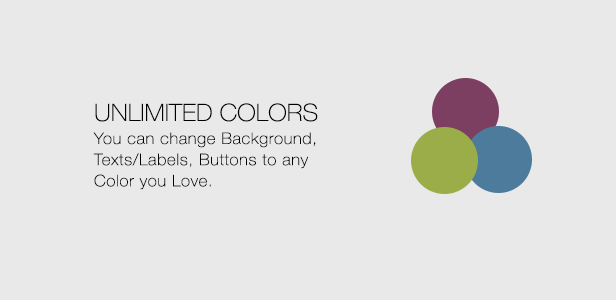
<style>
.page{position:relative;width:616px;height:300px;background:#e9e9e9}
.page>*{position:absolute;margin:0}
.t1{font:24px "HelveticaNeueLTStd-Th";color:#000000;scale:1.04 1}
.t2{font:16px/21.2px "HelveticaNeueLTStd-Th";letter-spacing:0.04em;color:#000000;scale:1.04 1}
</style>
<div class="page">
<p class="t1" style="left:95px;top:103px;width:223px;height:19px">UNLIMITED COLORS</p>
<p class="t2" style="left:93px;top:132px;width:223px;height:58px">You can change Background, <br>Texts/Labels, Buttons to any <br>Color you Love.</p>
</div>
